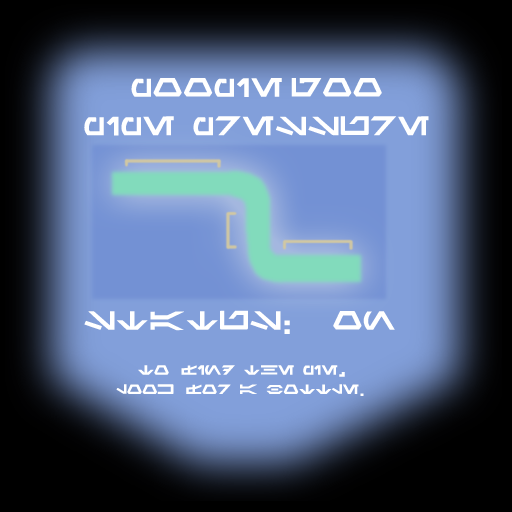
<style>
.page{position:relative;width:512px;height:512px}
.page>*{position:absolute;margin:0}
.t1{font:28.8px "Aurabesh";color:#ffffff;font-weight:bold;scale:1.11 1}
.t2{font:14.4px "Aurabesh";color:#ffffff;font-weight:bold;scale:1.11 1}
</style>
<div class="page">
<p class="t1" style="left:84px;top:78px;width:345px;height:58px;text-align:center">poopiegoo<br>pipe pressure</p>
<p class="t1" style="left:84px;top:310px;width:311px;height:24px">status: on</p>
<p class="t2" style="left:116px;top:365px;width:248px;height:31px;text-align:center">to find the pie,<br>look for a bottle.</p>
</div>
